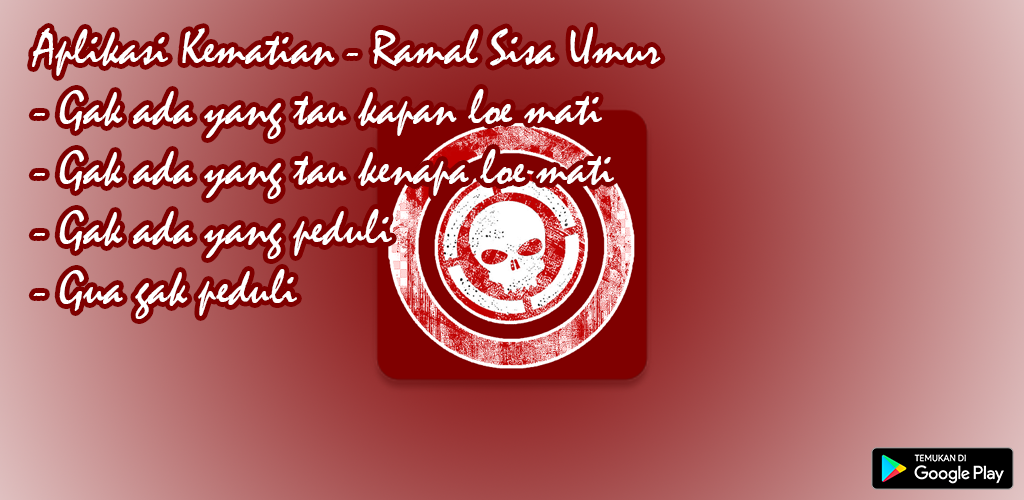
<style>
.page{position:relative;width:1024px;height:500px}
.page>*{position:absolute;margin:0}
.t1{font:50px "Mistral";color:#ffffff}
</style>
<div class="page">
<p class="t1" style="left:32px;top:27px;width:629px;height:292px">Aplikasi Kematian - Ramal Sisa Umur<br>- Gak ada yang tau kapan loe mati<br>- Gak ada yang tau kenapa loe mati<br>- Gak ada yang peduli<br>- Gua gak peduli</p>
</div>
